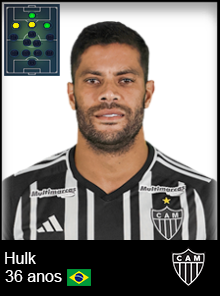
<style>
.page{position:relative;width:220px;height:296px;background:#ffffff}
.page>*{position:absolute;margin:0}
.t1{font:16px "ArialMT";color:#ffffff}
</style>
<div class="page">
<p class="t1" style="left:5px;top:252px;width:31px;height:12px">Hulk</p>
<p class="t1" style="left:5px;top:270px;width:57px;height:12px">36 anos</p>
</div>
